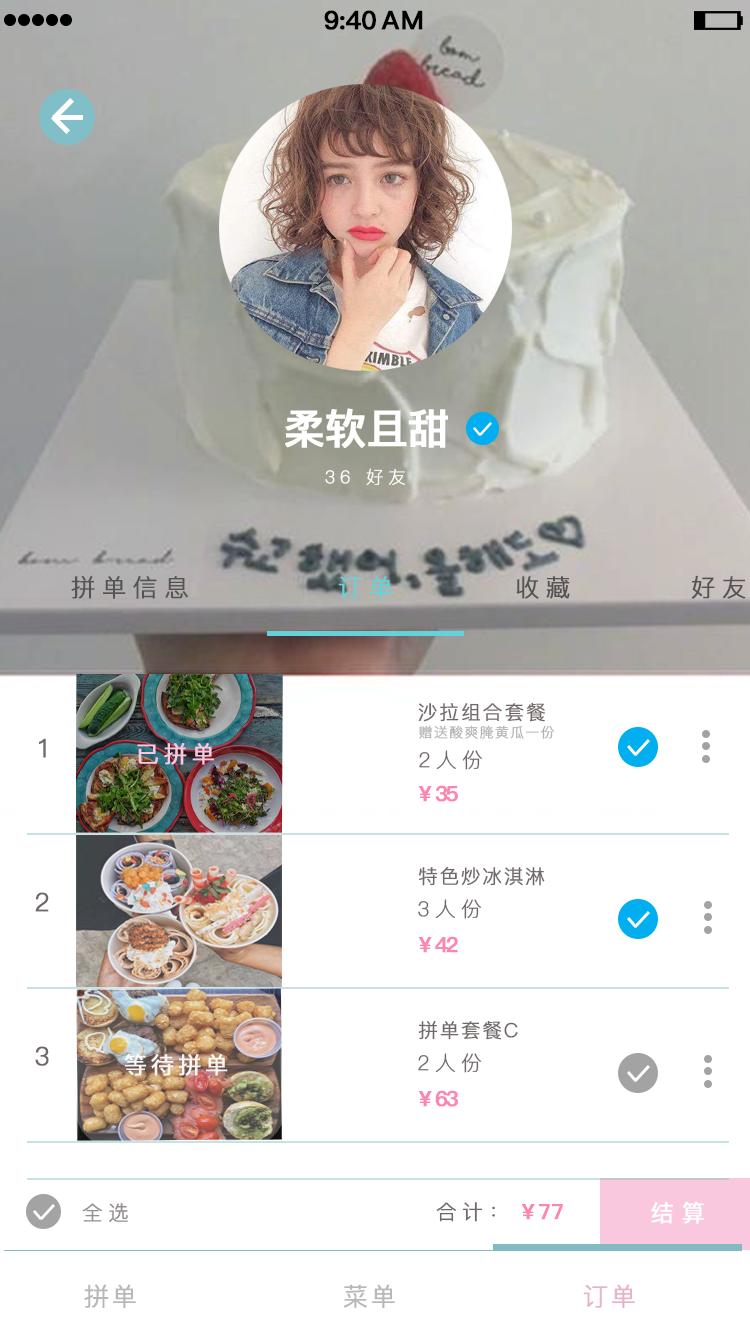
<style>
.page{position:relative;width:750px;height:1334px;background:#ffffff}
.page>*{position:absolute;margin:0}
.t1{font:25.4px "PingFang-SC-Bold";letter-spacing:-0.028em;color:#000000;font-weight:bold}
.t2{font:25.4px "PingFang-SC-Bold";letter-spacing:0.052em;color:#000000;font-weight:bold}
.t3{font:41.4px "PingFang-SC-Bold";letter-spacing:-0.028em;color:#ffffff;font-weight:bold}
.t4{font:17.4px "PingFang-SC-Light";letter-spacing:0.252em;color:#ffffff;font-weight:bold}
.t5{font:24.3px "PingFang-SC-Regular";letter-spacing:0.252em;color:#545454;font-weight:bold}
.t6{font:24.3px "PingFang-SC-Regular";letter-spacing:0.252em;color:#64d2d9;font-weight:bold}
.t7{font:19.5px "PingFang-SC-Regular";letter-spacing:0.085em;color:#716969;font-weight:bold}
.t8{font:13.7px "PingFang-SC-Light";letter-spacing:0.085em;color:#b4b0b0;font-weight:bold}
.t9{font:25.4px "PingFang-SC-Regular";letter-spacing:0.252em;color:#716969;font-weight:bold}
.t10{font:23px "PingFang-SC-Medium";letter-spacing:0.192em;color:#f9c8de;font-weight:bold}
.t11{font:20.4px "PingFang-SC-Light";letter-spacing:0.252em;color:#716969;font-weight:bold}
.t12{font:21px "PingFang-SC-Bold";letter-spacing:-0.108em;color:#fd85b1;font-weight:bold}
.t13{font:19.5px "PingFang-SC-Regular";letter-spacing:0.072em;color:#716969;font-weight:bold}
.t14{font:23px "PingFang-SC-Medium";letter-spacing:0.152em;color:#ffffff;font-weight:bold}
.t15{font:20.4px "PingFang-SC-Regular";letter-spacing:0.252em;color:#938e8e;font-weight:bold}
.t16{font:20.4px "PingFang-SC-Regular";letter-spacing:0.252em;color:#716969;font-weight:bold}
.t17{font:21px "PingFang-SC-Bold";letter-spacing:-0.008em;color:#fd85b1;font-weight:bold}
.t18{font:23.4px "PingFang-SC-Medium";letter-spacing:0.312em;color:#ffffff;font-weight:bold}
.t19{font:25px "PingFang-SC-Regular";letter-spacing:0.085em;color:#bbb7b7;font-weight:bold}
.t20{font:25px "PingFang-SC-Regular";letter-spacing:0.085em;color:#e6b3ca;font-weight:bold}
</style>
<div class="page">
<p class="t1" style="left:324px;top:10px;width:52px;height:20px">9:40</p>
<p class="t2" style="left:381px;top:10px;width:42px;height:20px">AM</p>
<p class="t3" style="left:285px;top:408px;width:163px;height:40px">柔软且甜</p>
<p class="t4" style="left:325px;top:468px;width:81px;height:18px">36 好友</p>
<p class="t5" style="left:71px;top:576px;width:117px;height:23px">拼单信息</p>
<p class="t6" style="left:338px;top:576px;width:55px;height:23px">订单</p>
<p class="t5" style="left:516px;top:576px;width:54px;height:23px">收藏</p>
<p class="t5" style="left:691px;top:575px;width:55px;height:24px">好友</p>
<p class="t7" style="left:418px;top:702px;width:127px;height:20px">沙拉组合套餐</p>
<p class="t8" style="left:419px;top:725px;width:136px;height:14px">赠送酸爽腌黄瓜一份</p>
<p class="t9" style="left:39px;top:738px;width:7px;height:20px">1</p>
<p class="t10" style="left:137px;top:743px;width:77px;height:22px">已拼单</p>
<p class="t11" style="left:419px;top:750px;width:64px;height:20px">2人份</p>
<p class="t12" style="left:418px;top:785px;width:40px;height:17px">¥ 35</p>
<p class="t13" style="left:419px;top:867px;width:126px;height:19px">特色炒冰淇淋</p>
<p class="t9" style="left:35px;top:892px;width:14px;height:20px">2</p>
<p class="t11" style="left:418px;top:899px;width:64px;height:20px">3人份</p>
<p class="t12" style="left:418px;top:936px;width:40px;height:17px">¥ 42</p>
<p class="t13" style="left:418px;top:1020px;width:100px;height:20px">拼单套餐C</p>
<p class="t9" style="left:35px;top:1046px;width:14px;height:20px">3</p>
<p class="t14" style="left:124px;top:1054px;width:104px;height:22px;opacity:0.91">等待拼单</p>
<p class="t11" style="left:418px;top:1053px;width:64px;height:20px">2人份</p>
<p class="t12" style="left:418px;top:1090px;width:40px;height:17px">¥ 63</p>
<p class="t15" style="left:82px;top:1203px;width:46px;height:19px">全选</p>
<p class="t16" style="left:436px;top:1202px;width:59px;height:20px">合计：</p>
<p class="t17" style="left:521px;top:1204px;width:42px;height:16px"><span class="t12">¥ </span>77</p>
<p class="t18" style="left:651px;top:1201px;width:53px;height:23px">结算</p>
<p class="t19" style="left:84px;top:1284px;width:52px;height:24px">拼单</p>
<p class="t19" style="left:344px;top:1284px;width:51px;height:24px">菜单</p>
<p class="t20" style="left:583px;top:1284px;width:52px;height:24px">订单</p>
</div>
